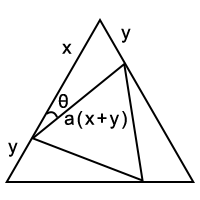
<style>
.page{position:relative;width:200px;height:200px;background:#ffffff}
.page>*{position:absolute;margin:0}
.t1{font:18.7px "ArialMT";letter-spacing:0.113em;color:#000000}
</style>
<div class="page">
<p class="t1" style="left:121px;top:28px;width:10px;height:15px">y</p>
<p class="t1" style="left:62px;top:43px;width:10px;height:11px">x</p>
<p class="t1" style="left:58px;top:94px;width:10px;height:14px">θ</p>
<p class="t1" style="left:64px;top:111px;width:63px;height:18px">a(x+y)</p>
<p class="t1" style="left:8px;top:142px;width:10px;height:15px">y</p>
</div>
